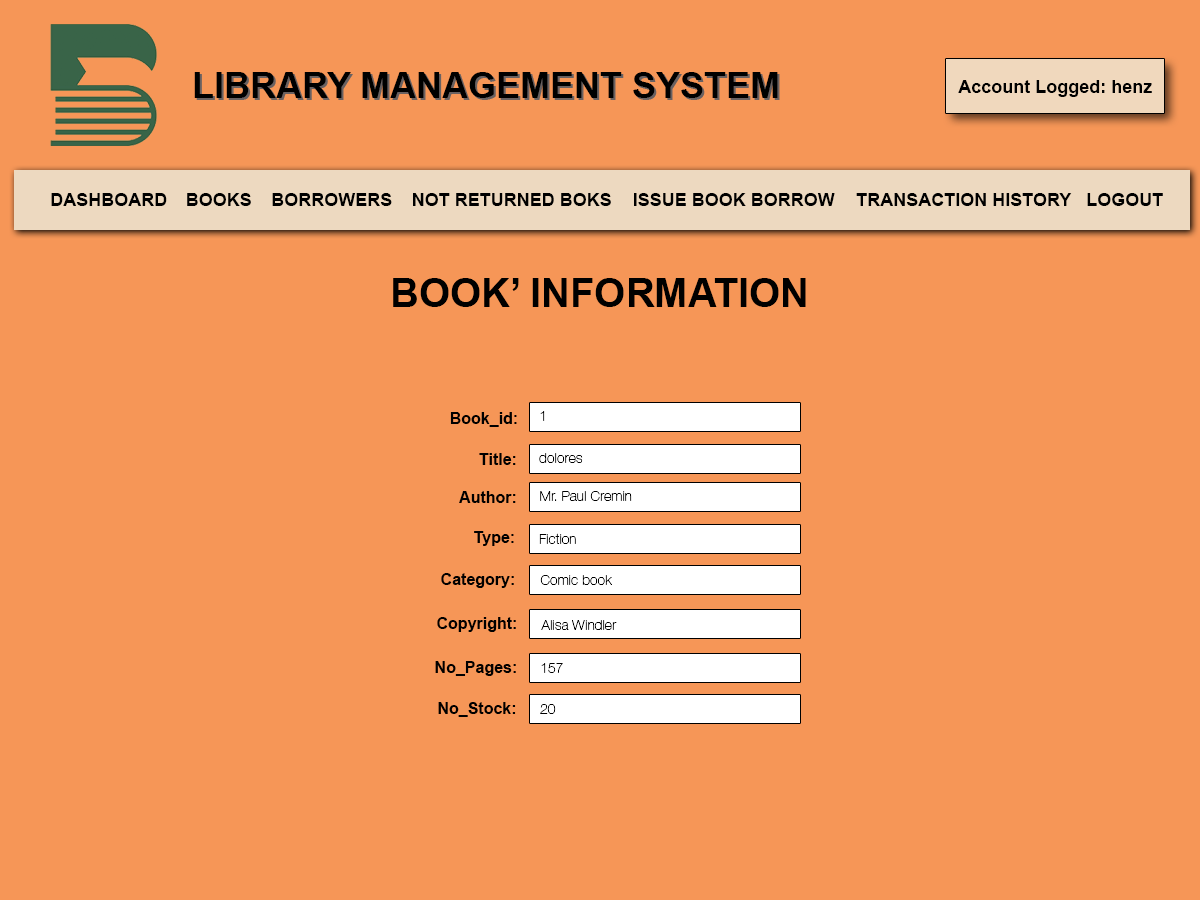
<style>
.page{position:relative;width:1200px;height:900px;background:#f69657}
.page>*{position:absolute;margin:0}
.t1{font:36px "Arial-BoldMT";color:#000000}
.t2{font:18px "Arial-BoldMT";color:#000000}
.t3{font:40px "Arial-BoldMT";color:#000000}
.t4{font:16px "Arial-BoldMT";color:#000000}
.t5{font:14px "HelveticaNeueLTStd-Th";color:#000000;text-transform:uppercase}
.t6{font:14px "HelveticaNeueLTStd-Th";color:#000000}
</style>
<div class="page">
<p class="t1" style="left:194px;top:72px;width:584px;height:26px">LIBRARY MANAGEMENT SYSTEM</p>
<p class="t2" style="left:958px;top:80px;width:194px;height:17px">Account Logged: henz</p>
<p class="t2" style="left:51px;top:193px;width:116px;height:13px">DASHBOARD</p>
<p class="t2" style="left:187px;top:193px;width:64px;height:13px">BOOKS</p>
<p class="t2" style="left:272px;top:193px;width:120px;height:13px">BORROWERS</p>
<p class="t2" style="left:413px;top:193px;width:198px;height:13px">NOT RETURNED BOKS</p>
<p class="t2" style="left:634px;top:193px;width:201px;height:13px">ISSUE BOOK BORROW</p>
<p class="t2" style="left:856px;top:193px;width:216px;height:13px">TRANSACTION HISTORY</p>
<p class="t2" style="left:1087px;top:193px;width:76px;height:13px">LOGOUT</p>
<p class="t3" style="left:393px;top:278px;width:413px;height:29px">BOOK’ INFORMATION</p>
<p class="t4" style="left:450px;top:412px;width:67px;height:15px">Book_id:</p>
<p class="t5" style="left:540px;top:411px;width:5px;height:10px">1</p>
<p class="t4" style="left:479px;top:453px;width:37px;height:12px">Title:</p>
<p class="t6" style="left:539px;top:453px;width:44px;height:10px">dolores</p>
<p class="t4" style="left:459px;top:491px;width:57px;height:12px">Author:</p>
<p class="t6" style="left:540px;top:491px;width:92px;height:10px">Mr. Paul Cremin</p>
<p class="t4" style="left:474px;top:531px;width:40px;height:15px">Type:</p>
<p class="t6" style="left:539px;top:533px;width:37px;height:11px">Fiction</p>
<p class="t4" style="left:441px;top:573px;width:73px;height:15px">Category:</p>
<p class="t6" style="left:540px;top:575px;width:72px;height:10px">Comic book</p>
<p class="t4" style="left:437px;top:617px;width:79px;height:15px">Copyright:</p>
<p class="t6" style="left:541px;top:620px;width:76px;height:10px">Alisa Windler</p>
<p class="t4" style="left:435px;top:661px;width:81px;height:15px">No_Pages:</p>
<p class="t6" style="left:541px;top:663px;width:22px;height:10px">157</p>
<p class="t4" style="left:438px;top:702px;width:78px;height:15px">No_Stock:</p>
<p class="t6" style="left:540px;top:704px;width:16px;height:10px">20</p>
</div>
